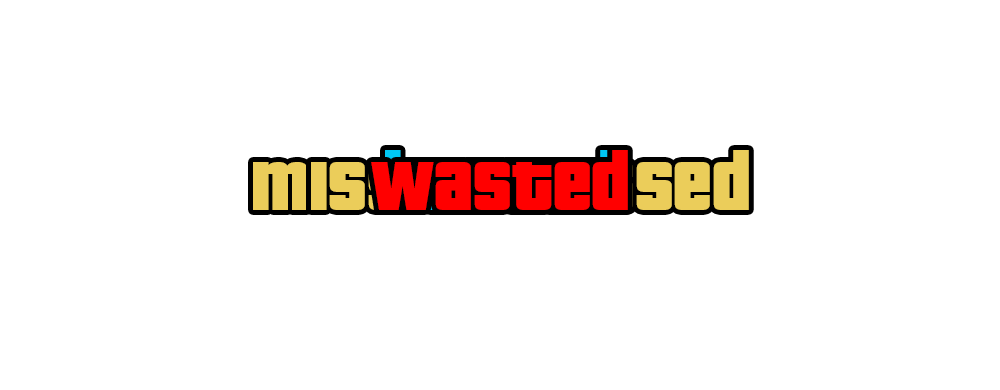
<style>
.page{position:relative;width:1000px;height:390px;background:#ffffff}
.page>*{position:absolute;margin:0}
.t1{font:75px "PricedownBl-Regular"}
.t2{font:75px "PricedownBl-Regular";color:#ff0000}
.t3{font:75px "PricedownBl-Regular";color:#ebcd5a}
</style>
<div class="page">
<p class="t1" style="left:311px;top:150px;width:438px;height:60px">ission Passed</p>
<p class="t2" style="left:371px;top:150px;width:257px;height:60px">Wasted</p>
<p class="t2" style="left:385px;top:150px;width:231px;height:60px">busted</p>
<p class="t3" style="left:253px;top:162px;width:55px;height:48px">M</p>
</div>
